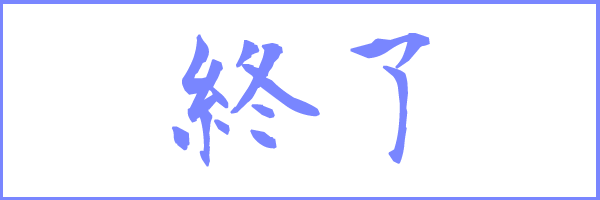
<style>
.page{position:relative;width:600px;height:200px;background:#ffffff}
.page>*{position:absolute;margin:0}
.t1{font:164.4px "AoyagiKouzanFontTOTF";letter-spacing:-0.1em;color:#7986ff;font-weight:bold}
</style>
<div class="page">
<p class="t1" style="left:171px;top:33px;width:259px;height:134px">終了</p>
</div>
